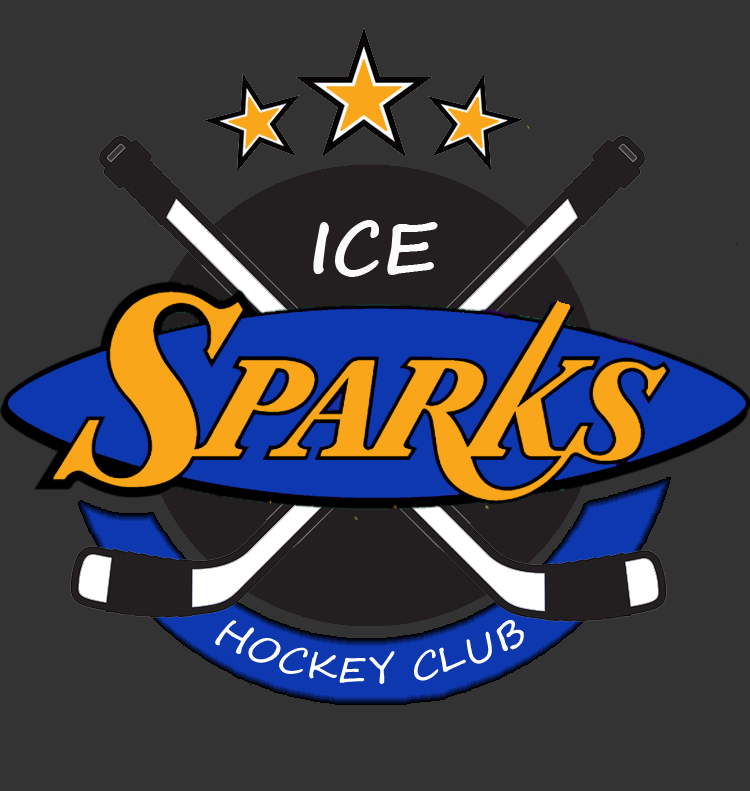
<style>
.page{position:relative;width:750px;height:791px;background:#333333}
.page>*{position:absolute;margin:0}
.t1{font:72px "SegoeScript-Bold";color:#fbfbfb}
.t2{font:36px "SegoeScript";color:#ffffff}
</style>
<div class="page">
<p class="t1" style="left:313px;top:220px;width:125px;height:57px">ICE</p>
<p class="t2" style="left:215px;top:620px;width:309px;height:64px">HOCKEY CLUB</p>
</div>
